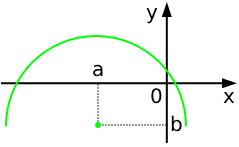
<style>
.page{position:relative;width:239px;height:147px;background:#ffffff}
.page>*{position:absolute;margin:0}
.t1{font:20px "DejaVuSans";color:#000000}
</style>
<div class="page">
<p class="t1" style="left:146px;top:8px;width:12px;height:16px">y</p>
<p class="t1" style="left:93px;top:64px;width:10px;height:13px">a</p>
<p class="t1" style="left:151px;top:88px;width:11px;height:16px">0</p>
<p class="t1" style="left:223px;top:92px;width:12px;height:11px">x</p>
<p class="t1" style="left:171px;top:115px;width:11px;height:17px">b</p>
</div>
